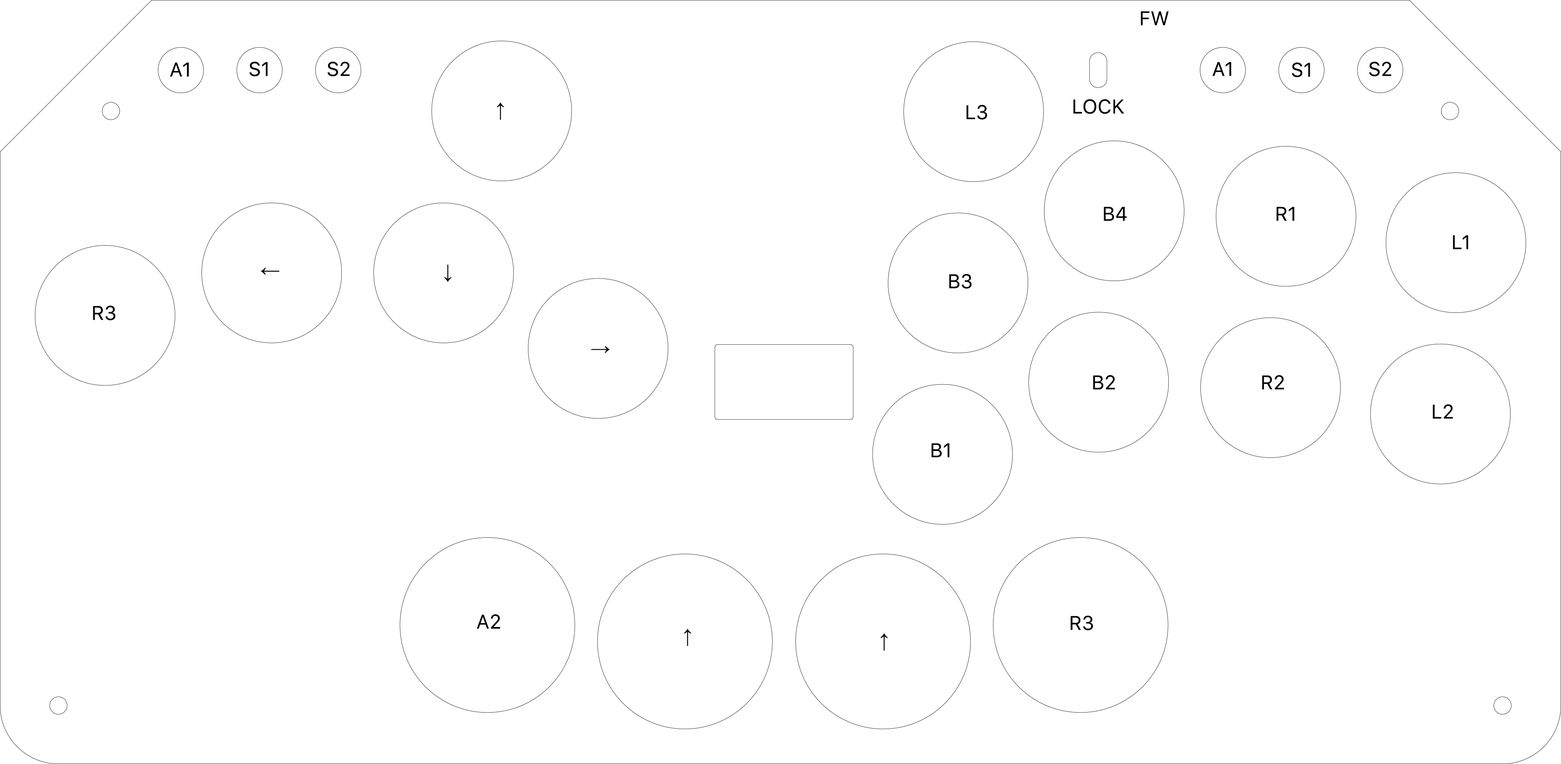
<style>
.page{position:relative;width:1561px;height:764px;background:#ffffff}
.page>*{position:absolute;margin:0}
.t1{font:19.7px "SFUIText-Regular";color:#000000}
.t2{font:19.7px "TimesNewRomanPSMT";color:#000000}
</style>
<div class="page">
<p class="t1" style="left:1141px;top:11px;width:28px;height:14px">FW</p>
<p class="t1" style="left:170px;top:63px;width:19px;height:13px">A1</p>
<p class="t1" style="left:249px;top:62px;width:19px;height:14px">S1</p>
<p class="t1" style="left:327px;top:62px;width:23px;height:14px">S2</p>
<p class="t1" style="left:1212px;top:62px;width:19px;height:14px">A1</p>
<p class="t1" style="left:1292px;top:63px;width:18px;height:14px">S1</p>
<p class="t1" style="left:1369px;top:62px;width:23px;height:14px">S2</p>
<p class="t1" style="left:1073px;top:99px;width:51px;height:15px">LOCK</p>
<p class="t2" style="left:497px;top:102px;width:7px;height:18px">↑</p>
<p class="t1" style="left:967px;top:104px;width:21px;height:16px">L3</p>
<p class="t1" style="left:1104px;top:206px;width:23px;height:15px">B4</p>
<p class="t1" style="left:1277px;top:206px;width:18px;height:15px">R1</p>
<p class="t1" style="left:1453px;top:235px;width:16px;height:14px">L1</p>
<p class="t2" style="left:261px;top:267px;width:19px;height:8px">←</p>
<p class="t2" style="left:444px;top:264px;width:8px;height:18px">↓</p>
<p class="t1" style="left:949px;top:274px;width:23px;height:15px">B3</p>
<p class="t1" style="left:93px;top:305px;width:23px;height:15px">R3</p>
<p class="t2" style="left:591px;top:346px;width:19px;height:7px">→</p>
<p class="t1" style="left:1093px;top:375px;width:22px;height:14px">B2</p>
<p class="t1" style="left:1262px;top:375px;width:22px;height:14px">R2</p>
<p class="t1" style="left:1433px;top:404px;width:20px;height:15px">L2</p>
<p class="t1" style="left:932px;top:443px;width:18px;height:14px">B1</p>
<p class="t1" style="left:477px;top:614px;width:24px;height:14px">A2</p>
<p class="t1" style="left:1071px;top:615px;width:22px;height:15px">R3</p>
<p class="t2" style="left:684px;top:628px;width:7px;height:18px">↑</p>
<p class="t2" style="left:881px;top:633px;width:7px;height:18px">↑</p>
</div>
